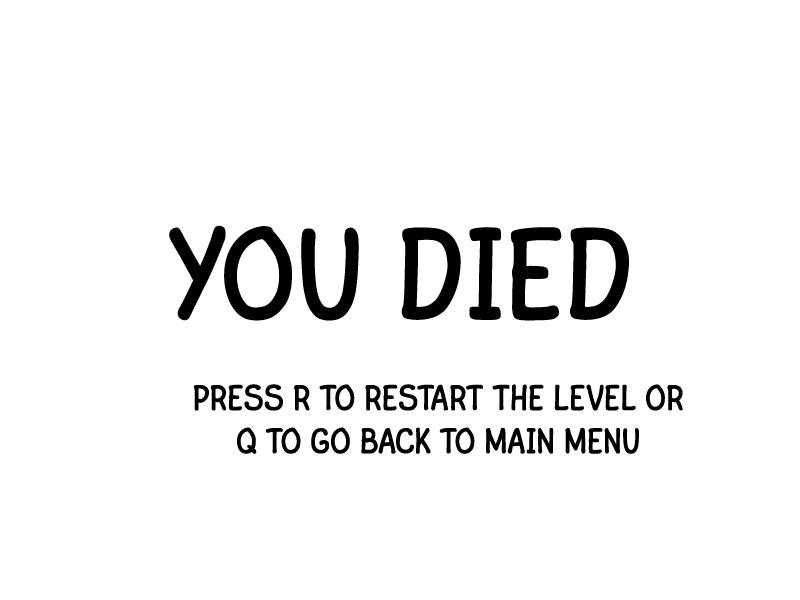
<style>
.page{position:relative;width:800px;height:600px;background:#ffffff}
.page>*{position:absolute;margin:0}
.t1{font:130.9px "FinaleCopyistTextExt";color:#000000;text-transform:uppercase}
.t2{font:36px "FinaleCopyistTextExt";color:#000000;text-transform:uppercase}
</style>
<div class="page">
<p class="t1" style="left:169px;top:225px;width:460px;height:96px">you died</p>
<p class="t2" style="left:193px;top:384px;width:490px;height:70px;text-align:center">press R to restart the level or q to go back to main menu</p>
</div>
